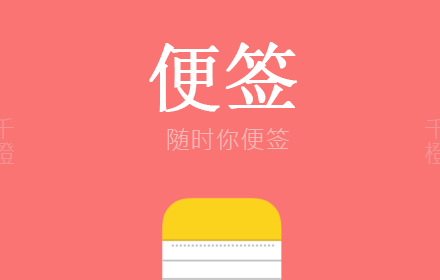
<style>
.page{position:relative;width:440px;height:280px;background:#fa7474}
.page>*{position:absolute;margin:0}
.t1{font:75px "SimSun";color:#ffffff;font-weight:bold}
.t2{font:25px "MicrosoftJhengHeiRegular";color:#f4b5b5}
</style>
<div class="page">
<p class="t1" style="left:149px;top:42px;width:148px;height:70px">便签</p>
<p class="t2" style="left:167px;top:128px;width:122px;height:23px">随时你便签</p>
</div>
